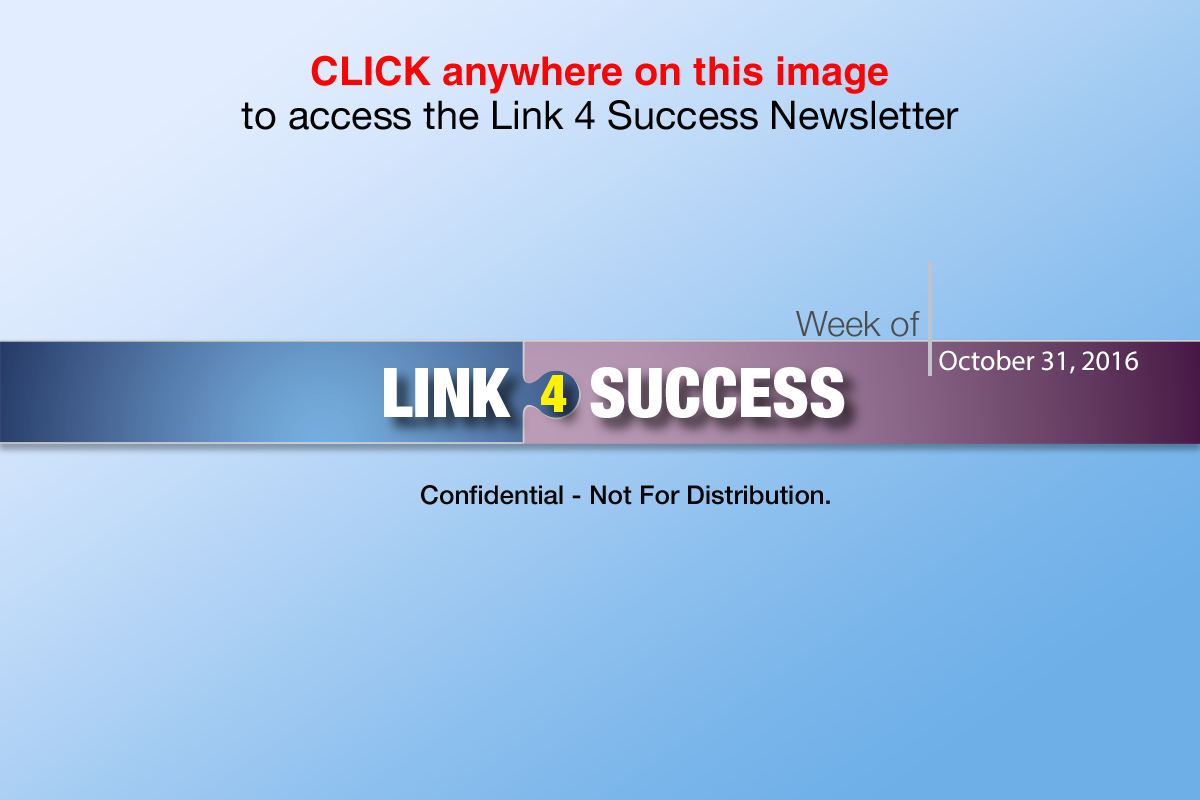
<style>
.page{position:relative;width:1200px;height:800px}
.page>*{position:absolute;margin:0}
.t1{font:39.6px "HelveticaLTStd-Bold";color:#fc0303}
.t2{font:39.6px "HelveticaNeue-Roman";color:#000000}
.t3{font:35.1px "HelveticaNeue-Light";color:#4d4d4d}
.t4{font:28.2px "MyriadPro-Regular";color:#ffffff}
.t5{font:26.1px "HelveticaNeue-Medium";color:#040404}
</style>
<div class="page">
<p class="t1" style="left:311px;top:55px;width:577px;height:39px">CLICK anywhere on this image</p>
<p class="t2" style="left:241px;top:100px;width:718px;height:30px">to access the Link 4 Success Newsletter</p>
<p class="t3" style="left:796px;top:311px;width:124px;height:26px">Week of</p>
<p class="t4" style="left:939px;top:350px;width:199px;height:24px">October 31, 2016</p>
<p class="t5" style="left:421px;top:485px;width:409px;height:20px">Confidential - Not For Distribution.</p>
</div>
